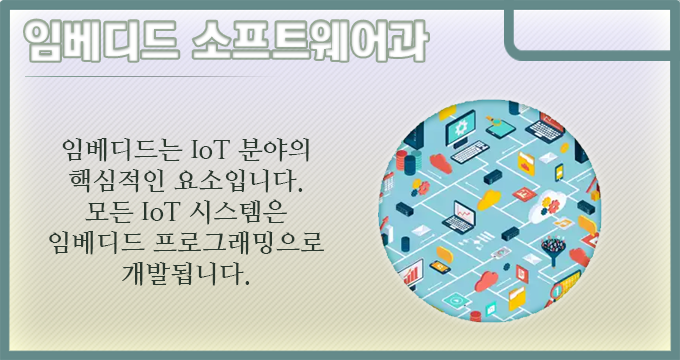
<style>
.page{position:relative;width:680px;height:360px}
.page>*{position:absolute;margin:0}
.t1{font:44px "KoreanTITGD5-R";letter-spacing:-0.01em;color:#ffffff}
.t2{font:26px "NanumMyeongjoBold";letter-spacing:-0.01em;color:#2a382e}
</style>
<div class="page">
<p class="t1" style="left:25px;top:20px;width:403px;height:41px">임베디드 소프트웨어과</p>
<p class="t2" style="left:49px;top:138px;width:275px;height:148px;text-align:center">임베디드는 IoT 분야의 핵심적인 요소입니다.<br>모든 IoT 시스템은 임베디드 프로그래밍으로 개발됩니다.</p>
</div>
